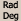
<style>
.page{position:relative;width:21px;height:21px;background:#d9cdc1}
.page>*{position:absolute;margin:0}
.t1{font:9px "Tahoma";color:#000000}
</style>
<div class="page">
<p class="t1" style="left:3px;top:1px;width:16px;height:20px">Rad<br>Deg</p>
</div>
